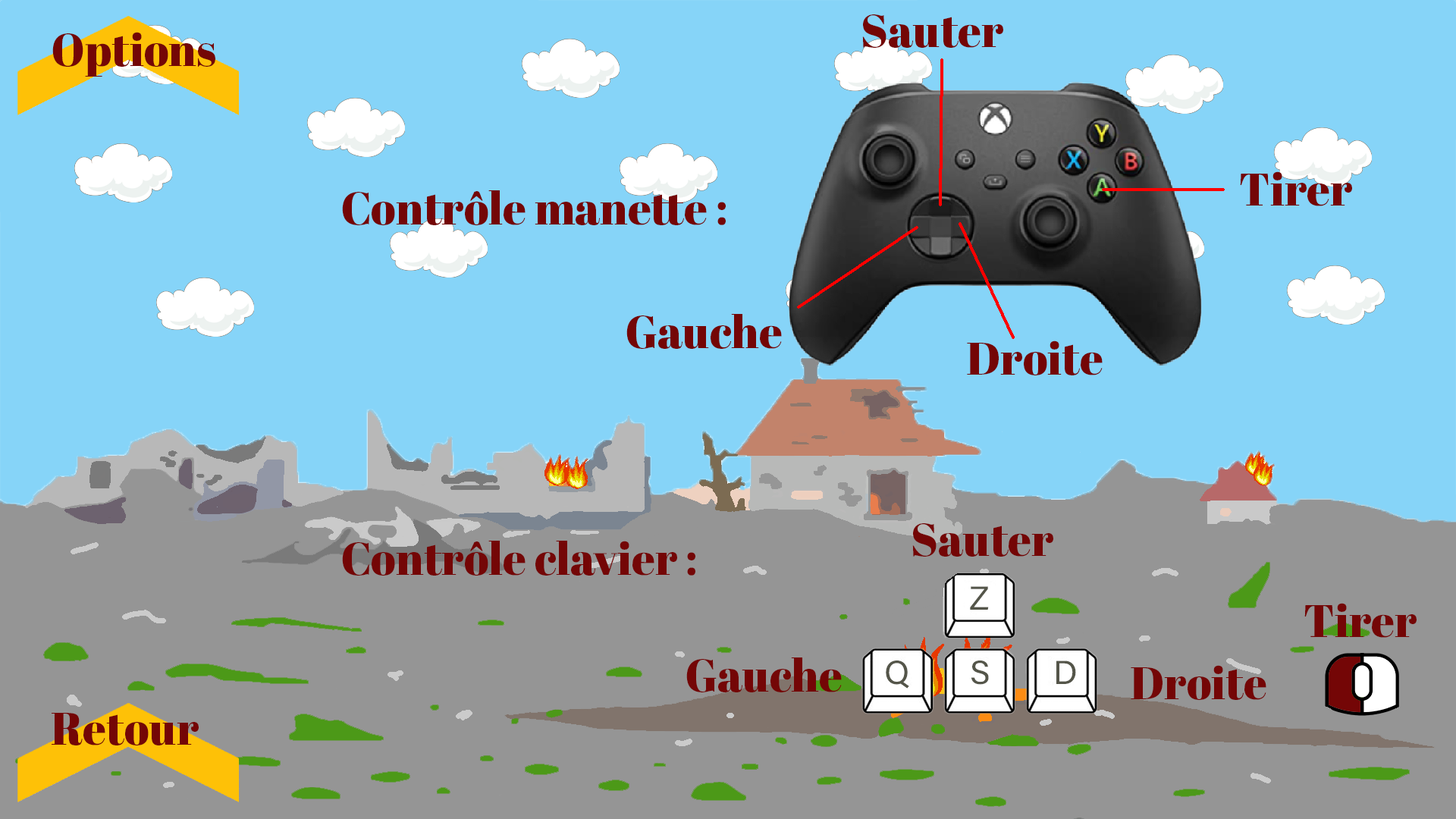
<style>
.page{position:relative;width:1456px;height:819px;background:#86d4f8}
.page>*{position:absolute;margin:0}
.t1{font:45.5px "AbrilFatface-Regular";color:#740606}
.t2{font:33.4px "AcuminConcept-Regular";color:#545549}
</style>
<div class="page">
<p class="t1" style="left:862px;top:14px;width:141px;height:34px">Sauter</p>
<p class="t1" style="left:52px;top:32px;width:163px;height:45px">Options</p>
<p class="t1" style="left:1240px;top:171px;width:112px;height:35px">Tirer</p>
<p class="t1" style="left:342px;top:190px;width:384px;height:35px">Contrôle manette : : :</p>
<p class="t1" style="left:626px;top:314px;width:156px;height:35px">Gauche</p>
<p class="t1" style="left:967px;top:340px;width:136px;height:35px">Droite</p>
<p class="t1" style="left:912px;top:523px;width:141px;height:34px">Sauter</p>
<p class="t1" style="left:342px;top:541px;width:353px;height:35px">Contrôle clavier :</p>
<p class="t2" style="left:970px;top:586px;width:19px;height:24px">Z</p>
<p class="t1" style="left:1304px;top:603px;width:113px;height:35px">Tirer</p>
<p class="t1" style="left:686px;top:657px;width:156px;height:35px">Gauche</p>
<p class="t2" style="left:886px;top:660px;width:23px;height:29px">Q</p>
<p class="t2" style="left:971px;top:660px;width:18px;height:25px">S</p>
<p class="t2" style="left:1056px;top:660px;width:20px;height:24px">D</p>
<p class="t1" style="left:1131px;top:665px;width:135px;height:35px">Droite</p>
<p class="t1" style="left:52px;top:713px;width:147px;height:32px">Retour</p>
</div>
